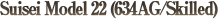
<style>
.page{position:relative;width:222px;height:19px;background:#ffffff}
.page>*{position:absolute;margin:0}
.t1{font:18px "RyuminPro-ExBold";letter-spacing:-0.08em;color:#4a3f32;font-weight:bold;scale:0.9 1}
</style>
<div class="page">
<p class="t1" style="left:0px;top:0px;width:218px;height:19px">Suisei Model 22 (634AG/Skilled)</p>
</div>
